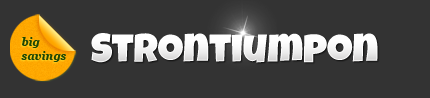
<style>
.page{position:relative;width:430px;height:98px;background:#333333}
.page>*{position:absolute;margin:0}
.t1{font:11px/14px "Georgia-BoldItalic";color:#1e4605}
.t2{font:40px "LuckiestGuy-Regular";color:#ffffff}
</style>
<div class="page">
<p class="t1" style="left:21px;top:37px;width:45px;height:25px">big<br>savings</p>
<p class="t2" style="left:91px;top:33px;width:287px;height:30px">Strontiumpon</p>
</div>
